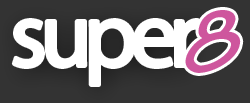
<style>
.page{position:relative;width:250px;height:103px;background:#333333}
.page>*{position:absolute;margin:0}
.t1{font:93.6px "TektonPro-BoldObl";letter-spacing:-0.08em;color:#ce569d}
.t2{font:93.6px "MyriadPro-Regular";letter-spacing:-0.08em;color:#ffffff}
</style>
<div class="page">
<p class="t1" style="left:185px;top:10px;width:56px;height:63px">8</p>
<p class="t2" style="left:13px;top:20px;width:186px;height:65px">super</p>
</div>
